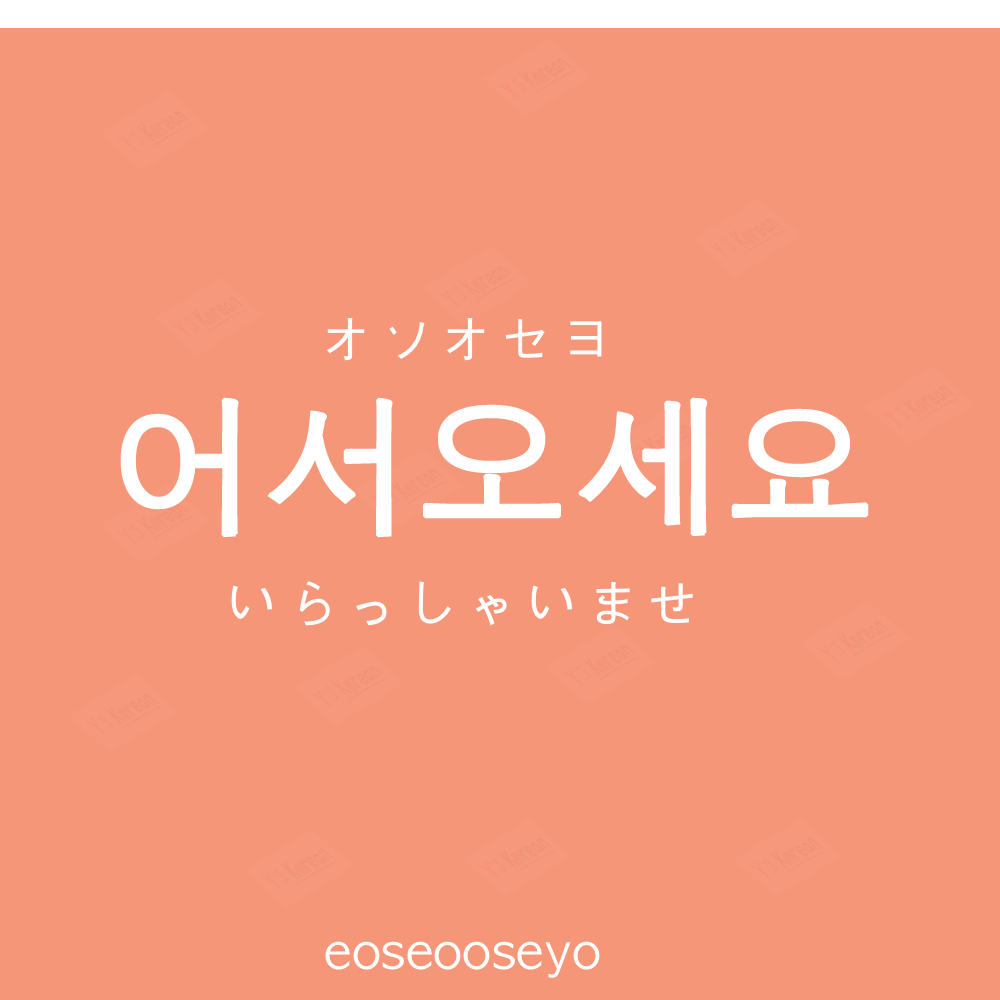
<style>
.page{position:relative;width:1000px;height:1000px;background:#f69679}
.page>*{position:absolute;margin:0}
.t1{font:60px "AppleGothic";color:#ffffff}
.t2{font:150px "AppleGothic";color:#ffffff;font-weight:bold}
.t3{font:50px "AppleGothic";color:#ffffff}
</style>
<div class="page">
<p class="t1" style="left:327px;top:317px;width:275px;height:44px">オソオセヨ</p>
<p class="t2" style="left:120px;top:397px;width:749px;height:141px">어서오세요</p>
<p class="t1" style="left:231px;top:581px;width:462px;height:45px">いらっしゃいませ</p>
<p class="t3" style="left:325px;top:941px;width:275px;height:37px">eoseooseyo</p>
</div>
